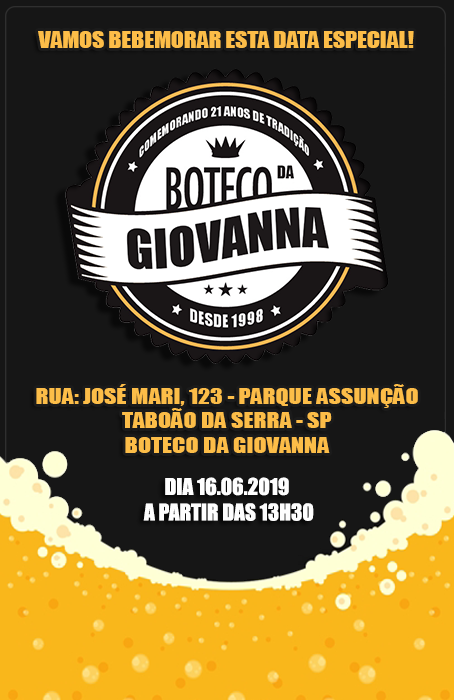
<style>
.page{position:relative;width:454px;height:700px;background:#161616}
.page>*{position:absolute;margin:0}
.t1{font:21.5px "Impact";color:#fcbd48;scale:1.1 1}
.t2{font:20.1px "Impact";color:#fcbd48;scale:1.2 1}
.t3{font:21.3px "Impact";color:#fefefe}
</style>
<div class="page">
<p class="t1" style="left:38px;top:31px;width:376px;height:17px">VAMOS BEBEMORAR ESTA DATA ESPECIAL!</p>
<p class="t2" style="left:36px;top:384px;width:382px;height:69px;text-align:center">RUA: JOSÉ MARI, 123 - PARQUE ASSUNÇÃO<br>TABOÃO DA SERRA - SP<br>BOTECO DA GIOVANNA</p>
<p class="t3" style="left:143px;top:477px;width:171px;height:44px;text-align:center">DIA 16.06.2019<br> A PARTIR DAS 13H30</p>
</div>
